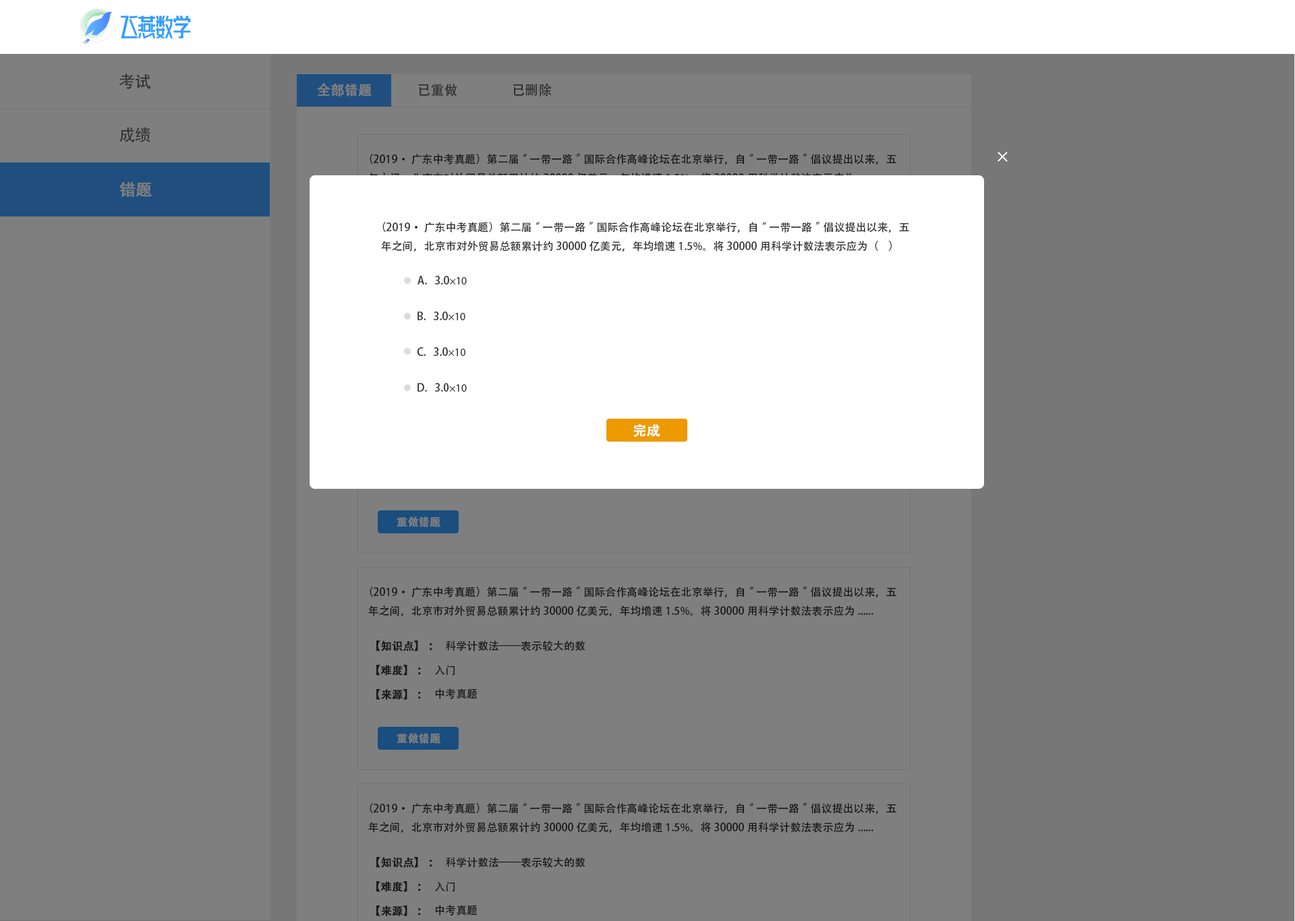
<style>
.page{position:relative;width:1295px;height:921px;background:#7f7f7f}
.page>*{position:absolute;margin:0}
.t1{font:16.2px "AdobeHeitiStd-Regular";color:#333333}
.t2{font:13.5px "AdobeHeitiStd-Regular";color:#7f7f7f;font-weight:bold}
.t3{font:13.5px "AdobeHeitiStd-Regular";color:#333333}
.t4{font:16.2px "AdobeHeitiStd-Regular";color:#7f7f7f;font-weight:bold}
.t5{font:10.8px "AdobeHeitiStd-Regular";color:#333333}
.t6{font:10.8px "MyriadPro-Regular";color:#333333}
.t7{font:13.5px "AdobeHeitiStd-Regular";color:#ffffff;font-weight:bold}
.t8{font:10.8px "AdobeHeitiStd-Regular";color:#7f7f7f;font-weight:bold}
.t9{font:10.8px "AdobeHeitiStd-Regular";color:#191919}
.t10{font:10.8px "AdobeHeitiStd-Regular";color:#191919;font-weight:bold}
</style>
<div class="page">
<p class="t1" style="left:119px;top:73px;width:32px;height:16px">考试</p>
<p class="t2" style="left:317px;top:83px;width:55px;height:14px">全部错题</p>
<p class="t3" style="left:419px;top:84px;width:38px;height:12px">已重做</p>
<p class="t3" style="left:513px;top:84px;width:39px;height:12px">已删除</p>
<p class="t1" style="left:119px;top:127px;width:31px;height:15px">成绩</p>
<p class="t4" style="left:119px;top:182px;width:33px;height:15px">错题</p>
<p class="t5" style="left:381px;top:222px;width:528px;height:30px">（2019·广东中考真题）第二届“一带一路”国际合作高峰论坛在北京举行，自“一带一路”倡议提出以来，五年之间，北京市对外贸易总额累计约30000亿美元，年均增速1.5%。将30000用科学计数法表示应为（    ）</p>
<p class="t5" style="left:417px;top:276px;width:50px;height:9px">A.   3.0<span class="t6">×10</span></p>
<p class="t5" style="left:417px;top:312px;width:48px;height:8px">B.   3.0<span class="t6">×10</span></p>
<p class="t5" style="left:417px;top:347px;width:48px;height:9px">C.   3.0<span class="t6">×10</span></p>
<p class="t5" style="left:417px;top:383px;width:50px;height:9px">D.   3.0<span class="t6">×10</span></p>
<p class="t7" style="left:633px;top:423px;width:27px;height:14px">完成</p>
<p class="t8" style="left:396px;top:516px;width:45px;height:11px">重做错题</p>
<p class="t9" style="left:368px;top:587px;width:528px;height:29px">（2019·广东中考真题）第二届“一带一路”国际合作高峰论坛在北京举行，自“一带一路”倡议提出以来，五年之间，北京市对外贸易总额累计约30000亿美元，年均增速1.5%。将30000用科学计数法表示应为......</p>
<p class="t10" style="left:376px;top:641px;width:56px;height:10px">【知识点】：</p>
<p class="t9" style="left:446px;top:641px;width:139px;height:10px">科学计数法——表示较大的数</p>
<p class="t10" style="left:376px;top:665px;width:45px;height:11px">【难度】：</p>
<p class="t9" style="left:435px;top:666px;width:19px;height:10px">入门</p>
<p class="t10" style="left:376px;top:689px;width:45px;height:11px">【来源】：</p>
<p class="t9" style="left:435px;top:688px;width:42px;height:11px">中考真题</p>
<p class="t8" style="left:396px;top:733px;width:45px;height:11px">重做错题</p>
<p class="t9" style="left:368px;top:803px;width:528px;height:30px">（2019·广东中考真题）第二届“一带一路”国际合作高峰论坛在北京举行，自“一带一路”倡议提出以来，五年之间，北京市对外贸易总额累计约30000亿美元，年均增速1.5%。将30000用科学计数法表示应为......</p>
<p class="t10" style="left:376px;top:857px;width:56px;height:11px">【知识点】：</p>
<p class="t9" style="left:446px;top:857px;width:139px;height:11px">科学计数法——表示较大的数</p>
<p class="t10" style="left:376px;top:881px;width:45px;height:11px">【难度】：</p>
<p class="t9" style="left:435px;top:882px;width:19px;height:10px">入门</p>
<p class="t10" style="left:376px;top:906px;width:45px;height:10px">【来源】：</p>
<p class="t9" style="left:435px;top:905px;width:42px;height:11px">中考真题</p>
</div>
